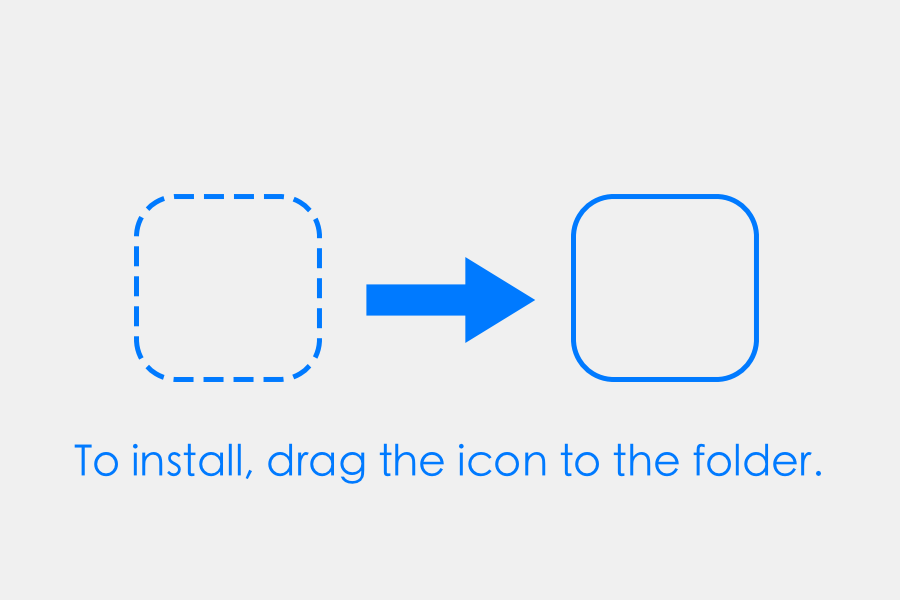
<style>
.page{position:relative;width:900px;height:600px;background:#f0f0f0}
.page>*{position:absolute;margin:0}
.t1{font:43px "STHeitiSC-Light";color:#007aff}
</style>
<div class="page">
<p class="t1" style="left:74px;top:443px;width:748px;height:41px">To install, drag the icon to the folder.</p>
</div>
